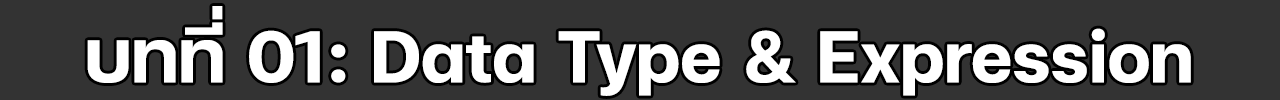
<style>
.page{position:relative;width:1280px;height:100px;background:#333333}
.page>*{position:absolute;margin:0}
.t1{font:100px "FCMinimalBold";color:#ffffff}
</style>
<div class="page">
<p class="t1" style="left:87px;top:6px;width:1104px;height:90px">บทที่ 01: Data Type &amp; Expression</p>
</div>
